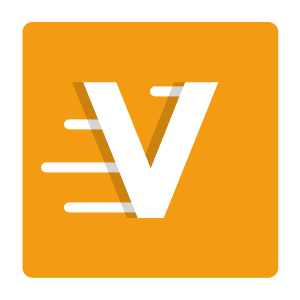
<style>
.page{position:relative;width:300px;height:300px;background:#f39b12}
.page>*{position:absolute;margin:0}
.t1{font:193.8px "Montserrat-Bold";color:#ffffff}
</style>
<div class="page">
<p class="t1" style="left:83px;top:82px;width:136px;height:136px">V</p>
</div>
